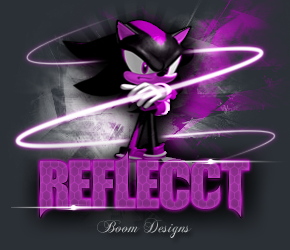
<style>
.page{position:relative;width:290px;height:250px}
.page>*{position:absolute;margin:0}
.t1{font:60px "Unrealised";color:#973398;scale:1.26 1}
.t2{font:18px "ChopinScript";color:#abacae}
</style>
<div class="page">
<p class="t1" style="left:40px;top:151px;width:209px;height:67px">ReflecCt</p>
<p class="t2" style="left:97px;top:217px;width:95px;height:21px">Boom Designs</p>
</div>
